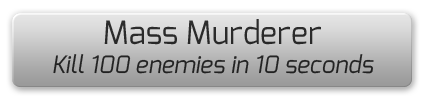
<style>
.page{position:relative;width:425px;height:100px}
.page>*{position:absolute;margin:0}
.t1{font:24px "Exo-Italic";color:#282828}
.t2{font:32px "Exo-Regular";color:#282828}
</style>
<div class="page">
<p class="t1" style="left:53px;top:19px;width:321px;height:55px;text-align:center"><span class="t2">Mass Murderer<br></span>Kill 100 enemies in 10 seconds</p>
</div>
